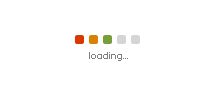
<style>
.page{position:relative;width:217px;height:100px;background:#ffffff}
.page>*{position:absolute;margin:0}
.t1{font:8px "Standard0753";color:#7f7f7f}
</style>
<div class="page">
<p class="t1" style="left:89px;top:52px;width:39px;height:9px">loading...</p>
</div>
